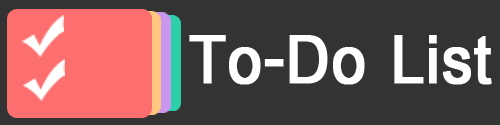
<style>
.page{position:relative;width:500px;height:125px;background:#333333}
.page>*{position:absolute;margin:0}
.t1{font:101.3px "CordiaNew-Bold";color:#ffffff;font-weight:bold;scale:0.9 1}
</style>
<div class="page">
<p class="t1" style="left:189px;top:35px;width:303px;height:50px">To-Do List</p>
</div>
